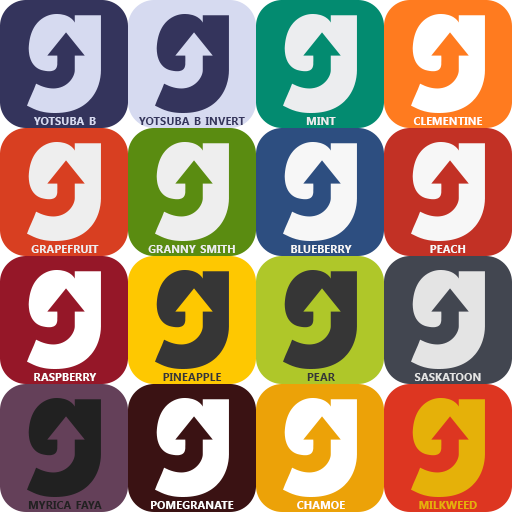
<style>
.page{position:relative;width:512px;height:512px}
.page>*{position:absolute;margin:0}
.t1{font:16px "SegoeUI-Bold";color:#d6daf0;font-variant:small-caps}
.t2{font:16px "SegoeUI-Bold";color:#34345c;font-variant:small-caps}
.t3{font:16px "SegoeUI-Bold";color:#ecedef;font-variant:small-caps}
.t4{font:16px "SegoeUI-Bold";color:#ffffff;font-variant:small-caps}
.t5{font:16px "SegoeUI-Bold";color:#eeeeee;font-variant:small-caps}
.t6{font:16px "SegoeUI-Bold";color:#f7f7f7;font-variant:small-caps}
.t7{font:16px "SegoeUI-Bold";color:#363636;font-variant:small-caps}
.t8{font:16px "SegoeUI-Bold";color:#e4e4e4;font-variant:small-caps}
.t9{font:16px "SegoeUI-Bold";color:#212121;font-variant:small-caps}
.t10{font:16px "SegoeUI-Bold";color:#e5b109;font-variant:small-caps}
</style>
<div class="page">
<p class="t1" style="left:34px;top:117px;width:62px;height:8px">yotsuba b</p>
<p class="t2" style="left:139px;top:117px;width:106px;height:8px">yotsuba b invert</p>
<p class="t3" style="left:306px;top:117px;width:30px;height:8px">mint</p>
<p class="t4" style="left:413px;top:117px;width:70px;height:8px">clementine</p>
<p class="t5" style="left:31px;top:245px;width:68px;height:8px">grapefruit</p>
<p class="t5" style="left:148px;top:245px;width:87px;height:8px">granny smith</p>
<p class="t6" style="left:291px;top:245px;width:61px;height:8px">blueberry</p>
<p class="t6" style="left:430px;top:245px;width:36px;height:8px">peach</p>
<p class="t4" style="left:34px;top:373px;width:63px;height:8px">raspberry</p>
<p class="t7" style="left:163px;top:373px;width:59px;height:8px">pineapple</p>
<p class="t7" style="left:307px;top:373px;width:28px;height:8px">pear</p>
<p class="t8" style="left:414px;top:373px;width:67px;height:8px">saskatoon</p>
<p class="t9" style="left:28px;top:501px;width:74px;height:8px">myrica faya</p>
<p class="t4" style="left:151px;top:501px;width:83px;height:8px">pomegranate</p>
<p class="t4" style="left:297px;top:501px;width:48px;height:8px">chamoe</p>
<p class="t10" style="left:419px;top:501px;width:58px;height:8px">milkweed</p>
</div>
